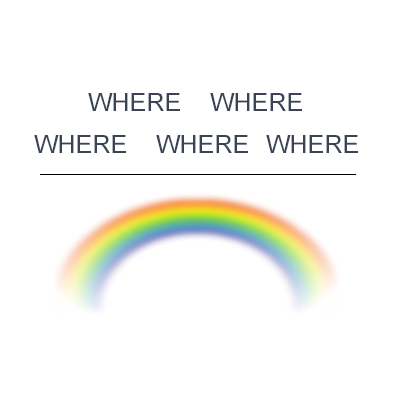
<style>
.page{position:relative;width:400px;height:400px;background:#ffffff}
.page>*{position:absolute;margin:0}
.t1{font:25px "ArialMT";color:#3b4457}
</style>
<div class="page">
<p class="t1" style="left:88px;top:93px;width:92px;height:18px">WHERE</p>
<p class="t1" style="left:210px;top:93px;width:92px;height:18px">WHERE</p>
<p class="t1" style="left:34px;top:135px;width:92px;height:18px">WHERE</p>
<p class="t1" style="left:156px;top:135px;width:92px;height:18px">WHERE</p>
<p class="t1" style="left:266px;top:135px;width:92px;height:18px">WHERE</p>
</div>
